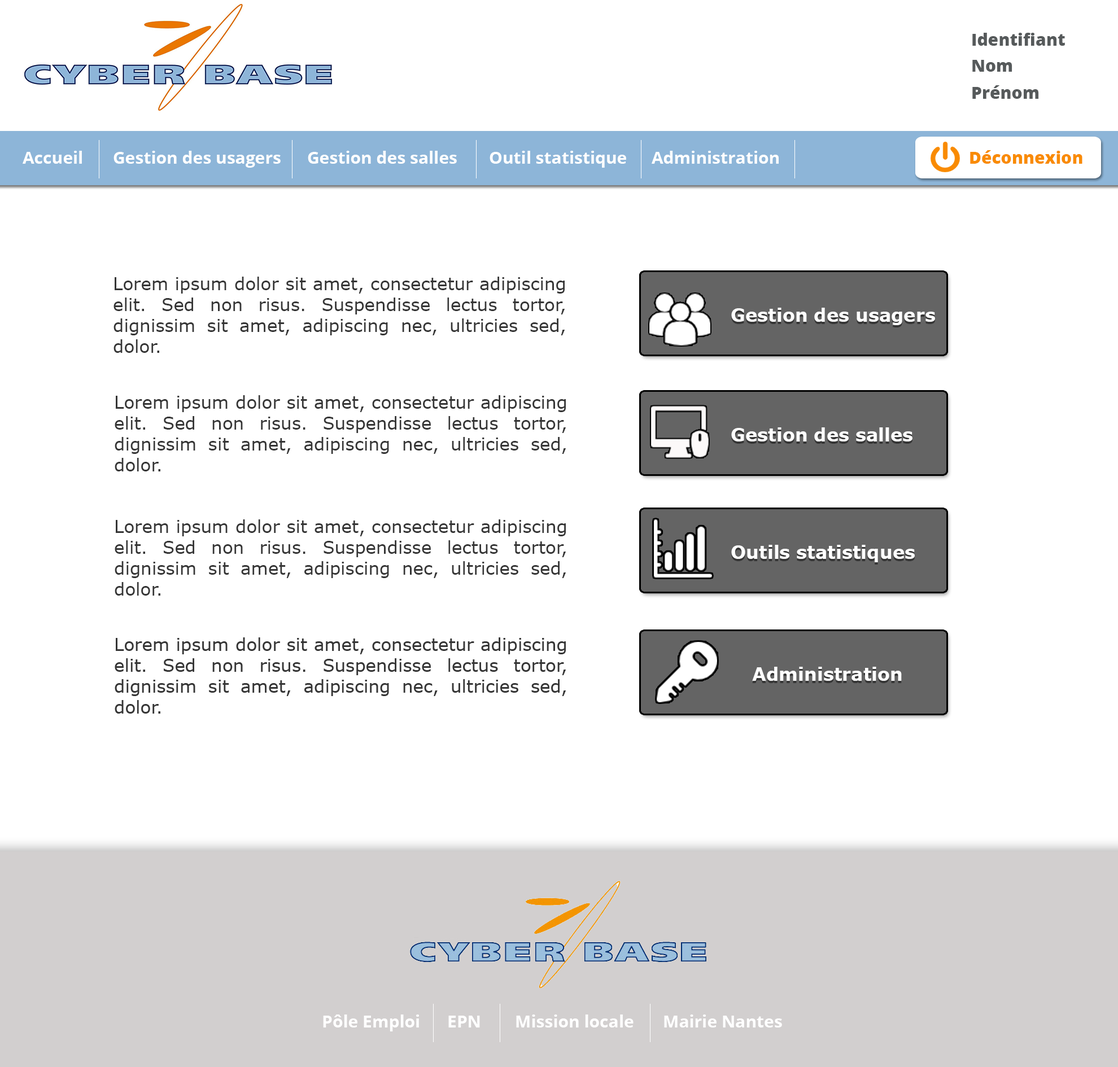
<style>
.page{position:relative;width:1118px;height:1067px;background:#ffffff}
.page>*{position:absolute;margin:0}
.t1{font:16.9px "OpenSans-Extrabold";color:#565a5b}
.t2{font:16.9px "OpenSans-Bold";color:#ffffff}
.t3{font:16.9px "OpenSans-Extrabold";color:#f98b02}
.t4{font:17.5px "Verdana";color:#353535}
.t5{font:18.1px "Verdana-Bold";color:#ffffff}
</style>
<div class="page">
<p class="t1" style="left:972px;top:33px;width:93px;height:13px">Identifiant</p>
<p class="t1" style="left:972px;top:60px;width:40px;height:12px">Nom</p>
<p class="t1" style="left:972px;top:85px;width:67px;height:14px">Prénom</p>
<p class="t2" style="left:23px;top:151px;width:59px;height:13px">Accueil</p>
<p class="t2" style="left:113px;top:151px;width:168px;height:17px">Gestion des usagers</p>
<p class="t2" style="left:308px;top:151px;width:149px;height:13px">Gestion des salles</p>
<p class="t2" style="left:489px;top:151px;width:137px;height:17px">Outil statistique</p>
<p class="t2" style="left:651px;top:151px;width:127px;height:13px">Administration</p>
<p class="t3" style="left:970px;top:150px;width:112px;height:14px">Déconnexion</p>
<p class="t4" style="left:113px;top:277px;width:452px;height:76px;text-align:justify">Lorem ipsum dolor sit amet, consectetur adipiscing elit. Sed non risus. Suspendisse lectus tortor, dignissim sit amet, adipiscing nec, ultricies sed, dolor.</p>
<p class="t5" style="left:731px;top:308px;width:204px;height:17px">Gestion des usagers</p>
<p class="t4" style="left:115px;top:395px;width:451px;height:76px;text-align:justify">Lorem ipsum dolor sit amet, consectetur adipiscing elit. Sed non risus. Suspendisse lectus tortor, dignissim sit amet, adipiscing nec, ultricies sed, dolor.</p>
<p class="t5" style="left:731px;top:427px;width:181px;height:14px">Gestion des salles</p>
<p class="t4" style="left:115px;top:519px;width:451px;height:77px;text-align:justify">Lorem ipsum dolor sit amet, consectetur adipiscing elit. Sed non risus. Suspendisse lectus tortor, dignissim sit amet, adipiscing nec, ultricies sed, dolor.</p>
<p class="t5" style="left:731px;top:545px;width:183px;height:17px">Outils statistiques</p>
<p class="t5" style="left:752px;top:667px;width:149px;height:14px">Administration</p>
<p class="t2" style="left:323px;top:1014px;width:96px;height:17px">Pôle Emploi</p>
<p class="t2" style="left:448px;top:1016px;width:32px;height:11px">EPN</p>
<p class="t2" style="left:516px;top:1014px;width:117px;height:13px">Mission locale</p>
<p class="t2" style="left:664px;top:1014px;width:118px;height:13px">Mairie Nantes</p>
</div>
